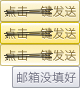
<style>
.page{position:relative;width:80px;height:88px}
.page>*{position:absolute;margin:0}
.t1{font:12px "HiraginoSansGB-W3";color:#796125}
.t2{font:12px "HiraginoSansGB-W3";color:#656678}
</style>
<div class="page">
<p class="t1" style="left:5px;top:5px;width:71px;height:12px">点击一键发送</p>
<p class="t1" style="left:5px;top:27px;width:71px;height:12px">点击一键发送</p>
<p class="t1" style="left:5px;top:49px;width:71px;height:12px">点击一键发送</p>
<p class="t2" style="left:17px;top:71px;width:59px;height:12px">邮箱没填好</p>
</div>
